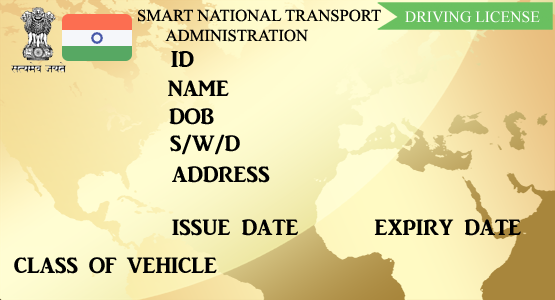
<style>
.page{position:relative;width:555px;height:300px}
.page>*{position:absolute;margin:0}
.t1{font:16.7px "TimesNewRomanPSMT";color:#010101}
.t2{font:15.8px "TimesNewRomanPSMT";color:#ffffff}
.t3{font:22.9px "ARJULIAN";color:#000000}
</style>
<div class="page">
<p class="t1" style="left:138px;top:9px;width:243px;height:13px">SMART NATIONAL TRANSPORT</p>
<p class="t2" style="left:405px;top:11px;width:135px;height:12px">DRIVING LICENSE</p>
<p class="t1" style="left:165px;top:29px;width:143px;height:13px">ADMINISTRATION</p>
<p class="t3" style="left:171px;top:51px;width:23px;height:16px">ID</p>
<p class="t3" style="left:168px;top:80px;width:61px;height:17px">NAME</p>
<p class="t3" style="left:169px;top:108px;width:45px;height:17px">DOB</p>
<p class="t3" style="left:170px;top:134px;width:70px;height:21px">S/W/D</p>
<p class="t3" style="left:172px;top:166px;width:98px;height:17px">ADDRESS</p>
<p class="t3" style="left:172px;top:219px;width:349px;height:17px">ISSUE DATE       EXPIRY DATE</p>
<p class="t3" style="left:14px;top:257px;width:203px;height:17px">CLASS OF VEHICLE</p>
</div>
